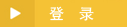
<style>
.page{position:relative;width:127px;height:27px;background:#f5c235}
.page>*{position:absolute;margin:0}
.t1{font:15px "SimHei";color:#ffffff}
</style>
<div class="page">
<p class="t1" style="left:49px;top:6px;width:45px;height:15px">登  录</p>
</div>
